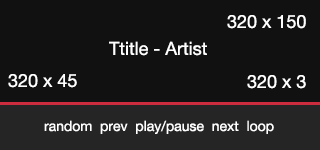
<style>
.page{position:relative;width:320px;height:150px;background:#111111}
.page>*{position:absolute;margin:0}
.t1{font:18px "HelveticaNeueLTPro-Roman";color:#ffffff}
.t2{font:14px "HelveticaNeueLTPro-Roman";color:#ffffff}
</style>
<div class="page">
<p class="t1" style="left:227px;top:15px;width:79px;height:14px">320 x 150</p>
<p class="t1" style="left:109px;top:41px;width:98px;height:15px">Ttitle - Artist</p>
<p class="t1" style="left:8px;top:74px;width:69px;height:14px">320 x 45</p>
<p class="t1" style="left:247px;top:75px;width:59px;height:14px">320 x 3</p>
<p class="t2" style="left:44px;top:120px;width:230px;height:14px">random  prev  play/pause  next  loop</p>
</div>
